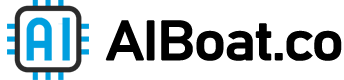
<style>
.page{position:relative;width:344px;height:80px;background:#ffffff}
.page>*{position:absolute;margin:0}
.t1{font:54px "Bahnschrift";letter-spacing:-0.06em;color:#000000;font-weight:bold;scale:1.11 1}
</style>
<div class="page">
<p class="t1" style="left:105px;top:20px;width:237px;height:41px">AIBoat.co</p>
</div>
